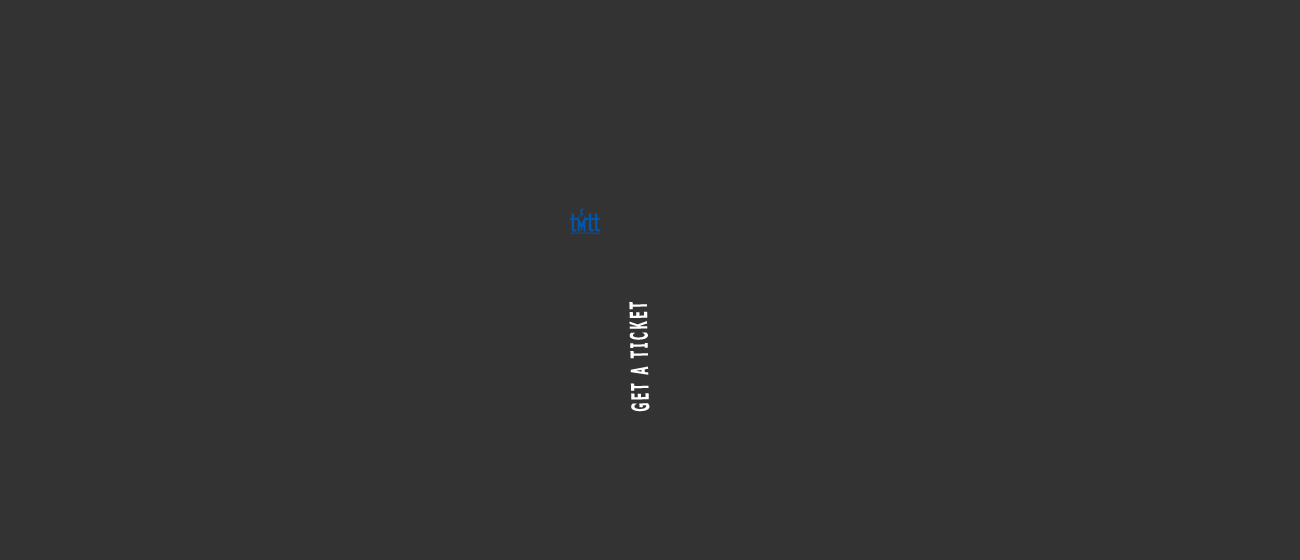
<style>
.page{position:relative;width:1300px;height:560px;background:#333333}
.page>*{position:absolute;margin:0}
.t1{font:24.1px "Tahoma-Bold";letter-spacing:0.205em;color:#ffffff;scale:0.5 1}
</style>
<div class="page">
<p class="t1" style="left:629px;top:302px;width:21px;height:110px;rotate:-91deg">GET A TICKET</p>
</div>
